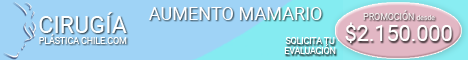
<style>
.page{position:relative;width:468px;height:60px;background:#9fd3f6}
.page>*{position:absolute;margin:0}
.t1{font:8.7px "Roboto-Regular";color:#fdffff}
.t2{font:23.4px "Roboto-Regular";color:#fdffff}
.t3{font:18.1px "Roboto-Regular";color:#ffffff}
.t4{font:8.8px "Roboto-Regular";color:#f0eaea}
.t5{font:6.8px "Roboto-Regular";color:#f0eaea}
.t6{font:21.5px "Roboto-Regular";color:#ffffff}
.t7{font:8.8px "Roboto-Regular";letter-spacing:-0.01em;color:#ffffff}
</style>
<div class="page">
<p class="t1" style="left:39px;top:12px;width:88px;height:32px;text-align:center"><span class="t2">CIRUGÍA<br></span>PLÁSTICA CHILE.COM</p>
<p class="t3" style="left:149px;top:7px;width:173px;height:13px">AUMENTO MAMARIO</p>
<p class="t4" style="left:363px;top:10px;width:72px;height:11px">PROMOCIÓN <span class="t5">desde</span></p>
<p class="t6" style="left:345px;top:22px;width:107px;height:21px">$2.150.000</p>
<p class="t7" style="left:284px;top:37px;width:52px;height:17px;text-align:center">SOLICITA TU<br>EVALUACIÓN</p>
</div>
